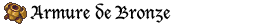
<style>
.page{position:relative;width:260px;height:27px;background:#ffffff}
.page>*{position:absolute;margin:0}
.t1{font:17.9px "LucidaBlackletter";color:#000000}
</style>
<div class="page">
<p class="t1" style="left:30px;top:3px;width:141px;height:20px">Armure de Bronze</p>
</div>
